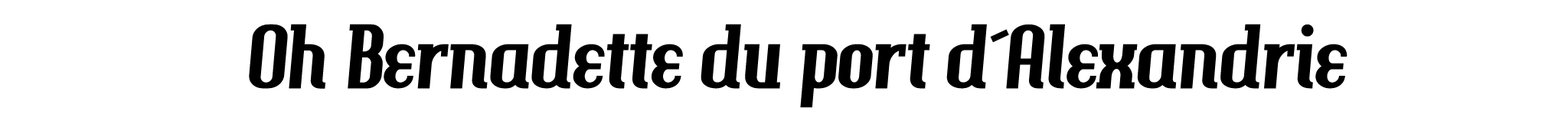
<style>
.page{position:relative;width:1568px;height:124px;background:#ffffff}
.page>*{position:absolute;margin:0}
.t1{font:86.5px "HamburgerHeaven";color:#000000}
</style>
<div class="page">
<p class="t1" style="left:249px;top:24px;width:1099px;height:84px">Oh Bernadette du port d´Alexandrie</p>
</div>
